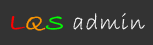
<style>
.page{position:relative;width:153px;height:45px;background:#333333}
.page>*{position:absolute;margin:0}
.t1{font:24px "BradleyHandITC";letter-spacing:0.025em;color:#ff0000;font-weight:bold}
.t2{font:24px "BradleyHandITC";letter-spacing:0.05em;color:#ff9600;font-weight:bold}
.t3{font:24px "BradleyHandITC";letter-spacing:0.025em;color:#00ff00;font-weight:bold}
.t4{font:24px "BradleyHandITC";letter-spacing:0.04em;color:#fbfbfb}
</style>
<div class="page">
<p class="t1" style="left:11px;top:16px;width:14px;height:14px">L</p>
<p class="t2" style="left:26px;top:16px;width:20px;height:15px">Q</p>
<p class="t3" style="left:45px;top:16px;width:18px;height:14px">S</p>
<p class="t4" style="left:73px;top:13px;width:72px;height:17px">admin</p>
</div>
